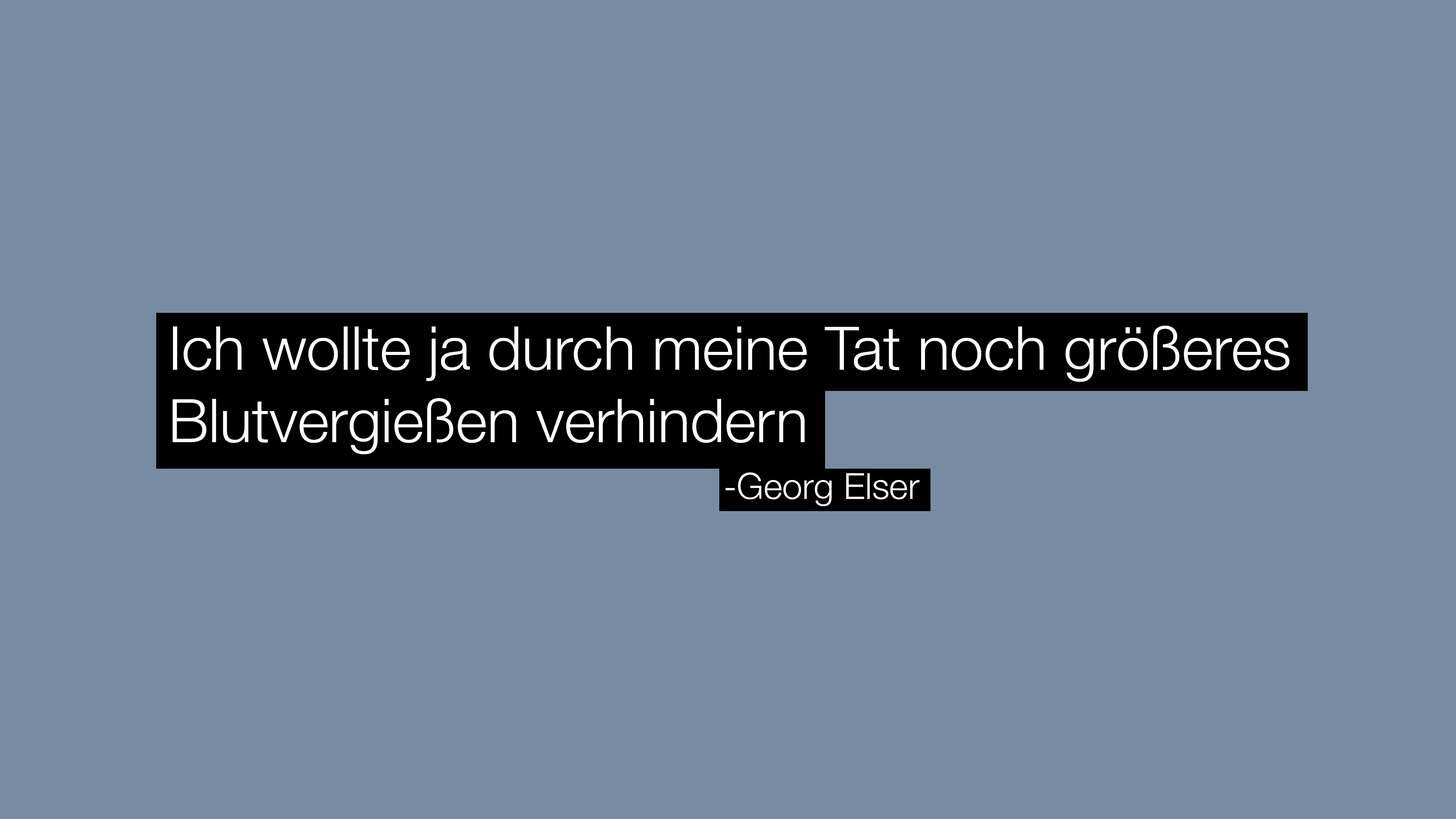
<style>
.page{position:relative;width:1456px;height:819px;background:#778ca3}
.page>*{position:absolute;margin:0}
.t1{font:60.2px "HelveticaNeue-Light";color:#ffffff}
.t2{font:36.1px "HelveticaNeue-Light";color:#ffffff}
</style>
<div class="page">
<p class="t1" style="left:173px;top:326px;width:1117px;height:128px">Ich wollte ja durch meine Tat noch größeres <br>Blutvergießen verhindern</p>
<p class="t2" style="left:725px;top:472px;width:194px;height:34px">-Georg Elser</p>
</div>
